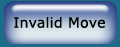
<style>
.page{position:relative;width:120px;height:47px}
.page>*{position:absolute;margin:0}
.t1{font:14px "Verdana";letter-spacing:0.02em;color:#000000}
</style>
<div class="page">
<p class="t1" style="left:14px;top:17px;width:91px;height:11px">Invalid Move</p>
</div>
